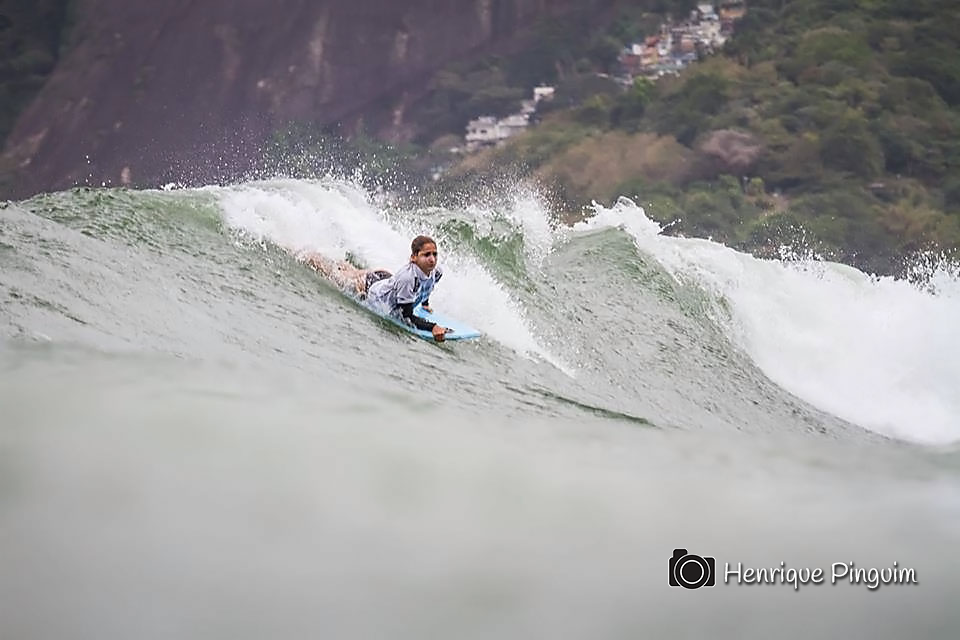
<style>
.page{position:relative;width:960px;height:640px}
.page>*{position:absolute;margin:0}
.t1{font:27.6px "Handlee-Regular";color:#ffffff}
</style>
<div class="page">
<p class="t1" style="left:724px;top:561px;width:194px;height:28px">Henrique Pinguim</p>
</div>
